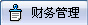
<style>
.page{position:relative;width:88px;height:25px}
.page>*{position:absolute;margin:0}
.t1{font:12px "SimSun";color:#000103}
</style>
<div class="page">
<p class="t1" style="left:32px;top:7px;width:47px;height:11px">财务管理</p>
</div>
